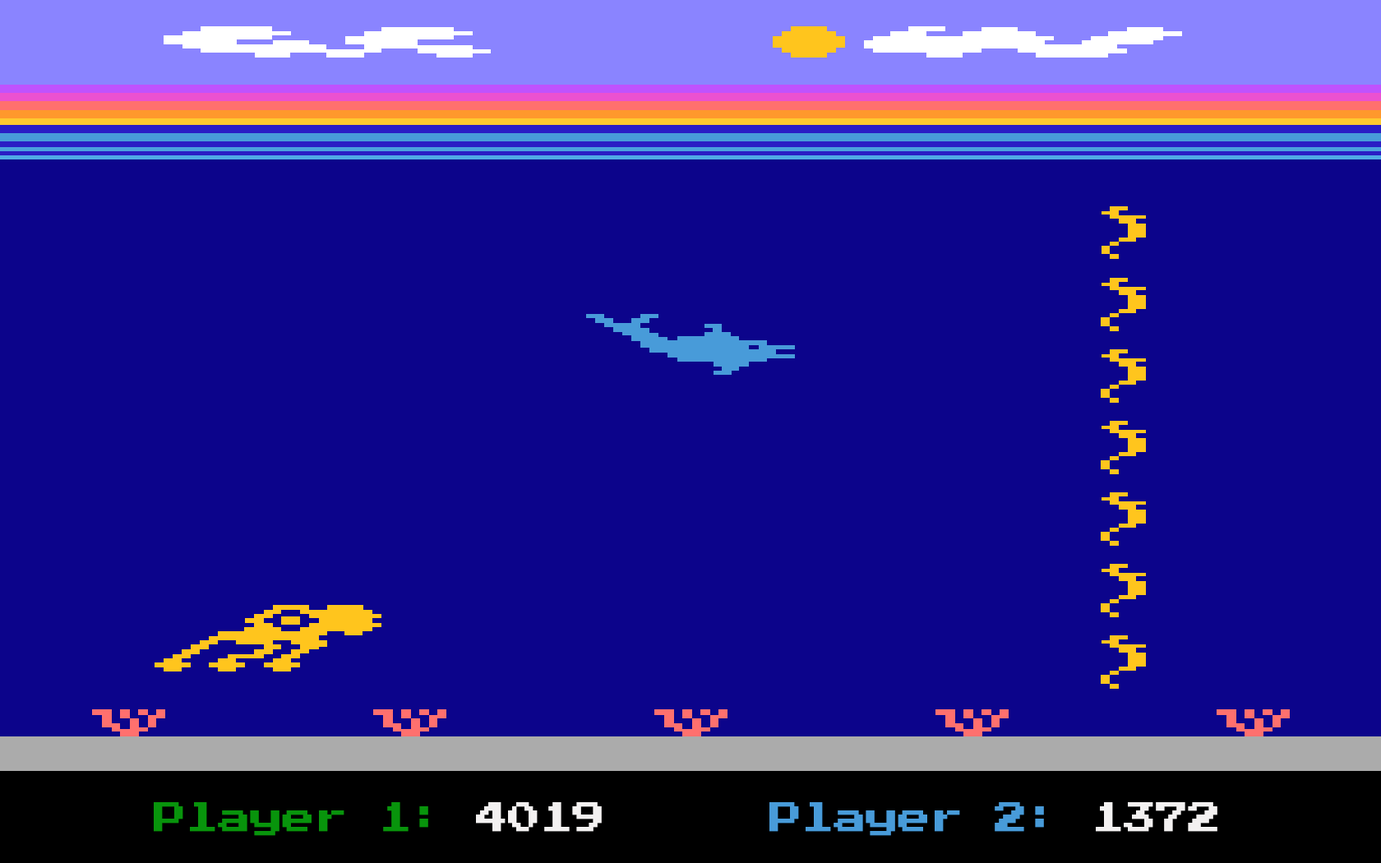
<style>
.page{position:relative;width:1381px;height:863px;background:#0c048b}
.page>*{position:absolute;margin:0}
.t1{font:32.9px "PressStart2P-Regular";letter-spacing:-0.02em;color:#08940c}
.t2{font:32.9px "PressStart2P-Regular";letter-spacing:-0.02em;color:#f3f1f1}
.t3{font:32.9px "PressStart2P-Regular";letter-spacing:-0.02em;color:#489bd9}
</style>
<div class="page">
<p class="t1" style="left:154px;top:802px;width:448px;height:34px">Player 1: <span class="t2">4019</span></p>
<p class="t3" style="left:770px;top:802px;width:448px;height:34px">Player 2: <span class="t2">1372</span></p>
</div>
